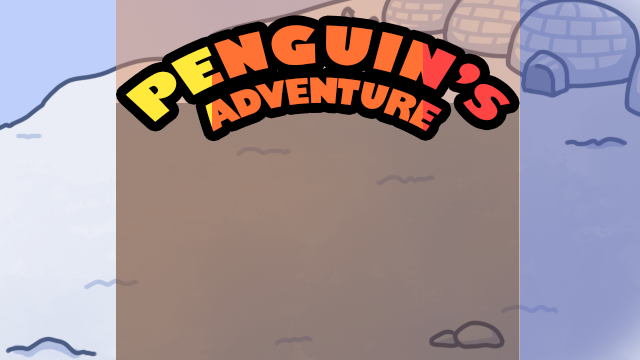
<style>
.page{position:relative;width:640px;height:360px}
.page>*{position:absolute;margin:0}
.t1{font:50.2px "GillSans-UltraBoldCondensed";scale:1.13 1}
.t2{font:33.3px "GillSans-UltraBoldCondensed";scale:1.13 1}
</style>
<div class="page">
<p class="t1" style="left:125px;top:25px;width:385px;height:107px;text-align:center">PENGUIN’s<br><span class="t2">ADVENTURE</span></p>
</div>
